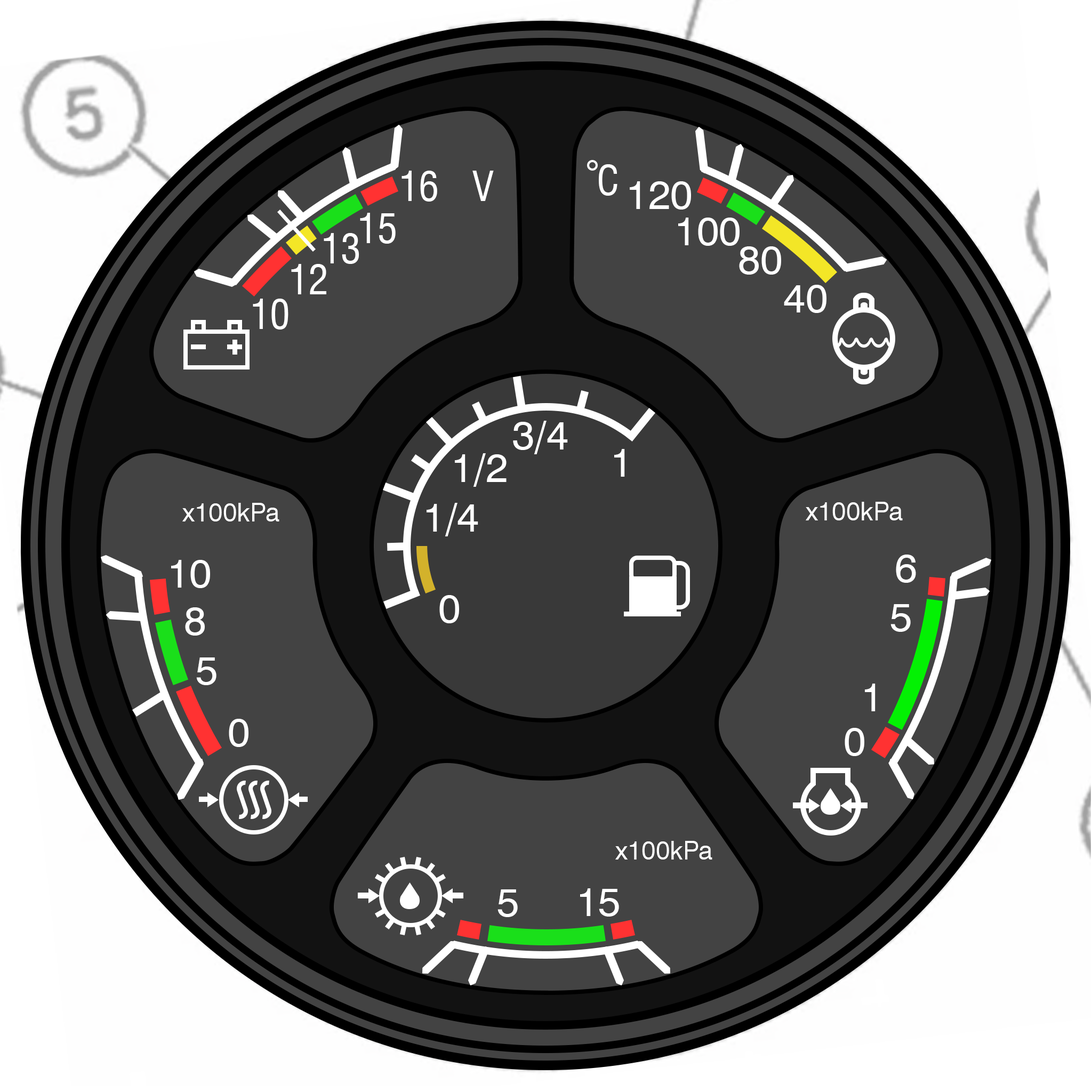
<style>
.page{position:relative;width:1092px;height:1092px;background:#434343}
.page>*{position:absolute;margin:0}
.t1{font:69.3px "Swiss721BT-RomanCondensed";color:#ffffff}
.t2{font:69.3px "Swiss721BT-Roman";color:#ffffff}
.t3{font:44.1px "Swiss721BT-Roman";color:#ffffff}
</style>
<div class="page">
<p class="t1" style="left:401px;top:171px;width:36px;height:31px">16</p>
<p class="t1" style="left:472px;top:171px;width:22px;height:30px">V</p>
<p class="t1" style="left:599px;top:164px;width:18px;height:32px">C</p>
<p class="t2" style="left:630px;top:181px;width:61px;height:29px">120</p>
<p class="t1" style="left:360px;top:213px;width:36px;height:31px">15</p>
<p class="t2" style="left:678px;top:218px;width:62px;height:28px">100</p>
<p class="t1" style="left:324px;top:233px;width:35px;height:31px">13</p>
<p class="t2" style="left:739px;top:246px;width:42px;height:29px">80</p>
<p class="t1" style="left:291px;top:264px;width:35px;height:30px">12</p>
<p class="t2" style="left:784px;top:285px;width:42px;height:28px">40</p>
<p class="t1" style="left:253px;top:299px;width:35px;height:31px">10</p>
<p class="t2" style="left:513px;top:421px;width:55px;height:33px">3/4</p>
<p class="t2" style="left:614px;top:449px;width:11px;height:28px">1</p>
<p class="t2" style="left:455px;top:453px;width:52px;height:34px">1/2</p>
<p class="t3" style="left:182px;top:503px;width:97px;height:18px">x100kPa</p>
<p class="t2" style="left:427px;top:503px;width:51px;height:33px">1/4</p>
<p class="t3" style="left:806px;top:502px;width:97px;height:18px">x100kPa</p>
<p class="t2" style="left:896px;top:555px;width:20px;height:28px">6</p>
<p class="t2" style="left:171px;top:560px;width:39px;height:28px">10</p>
<p class="t2" style="left:439px;top:595px;width:20px;height:28px">0</p>
<p class="t2" style="left:890px;top:604px;width:21px;height:28px">5</p>
<p class="t2" style="left:185px;top:607px;width:20px;height:29px">8</p>
<p class="t2" style="left:196px;top:657px;width:20px;height:28px">5</p>
<p class="t2" style="left:865px;top:684px;width:11px;height:27px">1</p>
<p class="t2" style="left:229px;top:719px;width:19px;height:28px">0</p>
<p class="t2" style="left:845px;top:728px;width:19px;height:28px">0</p>
<p class="t3" style="left:615px;top:841px;width:97px;height:19px">x100kPa</p>
<p class="t2" style="left:497px;top:889px;width:21px;height:28px">5</p>
<p class="t2" style="left:580px;top:888px;width:39px;height:29px">15</p>
</div>
